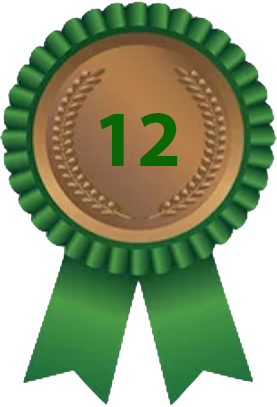
<style>
.page{position:relative;width:277px;height:407px;background:#ffffff}
.page>*{position:absolute;margin:0}
.t1{font:80px "MyriadPro-Bold";color:#0b6606}
</style>
<div class="page">
<p class="t1" style="left:100px;top:113px;width:78px;height:53px">12</p>
</div>
